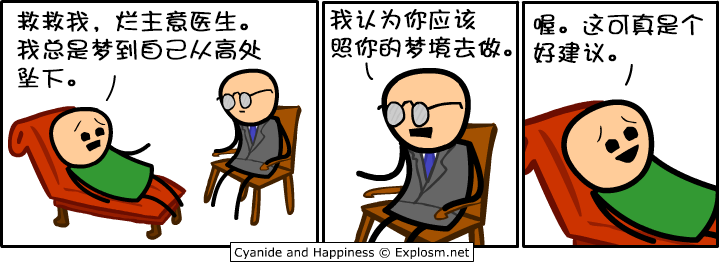
<style>
.page{position:relative;width:720px;height:267px;background:#ffffff}
.page>*{position:absolute;margin:0}
.t1{font:24px/28px "DFShaoNvW5";color:#000000;font-weight:bold}
</style>
<div class="page">
<p class="t1" style="left:17px;top:10px;width:244px;height:78px">救救我，烂主意医生。<br>我总是梦到自己从高处<br>坠下。</p>
<p class="t1" style="left:330px;top:8px;width:182px;height:51px">我认为你应该<br>照你的梦境去做。</p>
<p class="t1" style="left:533px;top:13px;width:170px;height:50px">喔。这可真是个<br>好建议。</p>
</div>
